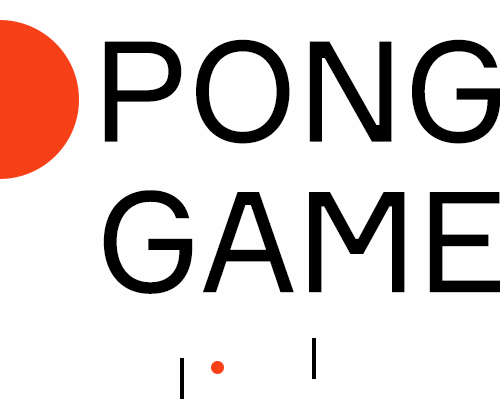
<style>
.page{position:relative;width:500px;height:420px;background:#fefefe}
.page>*{position:absolute;margin:0}
.t1{font:140px/150.4px "Formular";color:#000000;text-transform:uppercase}
</style>
<div class="page">
<p class="t1" style="left:103px;top:39px;width:399px;height:255px;text-align:right">pong<br>GAME</p>
</div>
